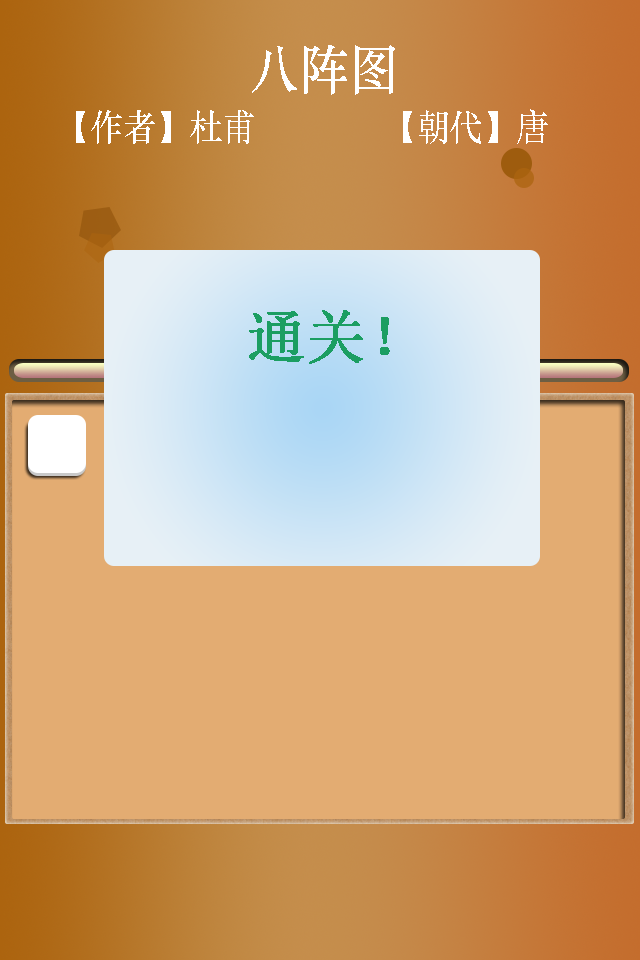
<style>
.page{position:relative;width:640px;height:960px;background:#e3ac72}
.page>*{position:absolute;margin:0}
.t1{font:55px "STZhongsong";color:#ffffff;scale:0.91 1}
.t2{font:36.7px "STZhongsong";color:#ffffff;scale:0.91 1}
.t3{font:58.3px "NSimSun";color:#1b9e62;font-weight:bold}
</style>
<div class="page">
<p class="t1" style="left:252px;top:45px;width:143px;height:50px">八阵图</p>
<p class="t2" style="left:76px;top:110px;width:178px;height:34px">【作者】杜甫</p>
<p class="t2" style="left:403px;top:109px;width:145px;height:35px">【朝代】唐</p>
<p class="t3" style="left:249px;top:310px;width:141px;height:54px">通关！</p>
</div>
